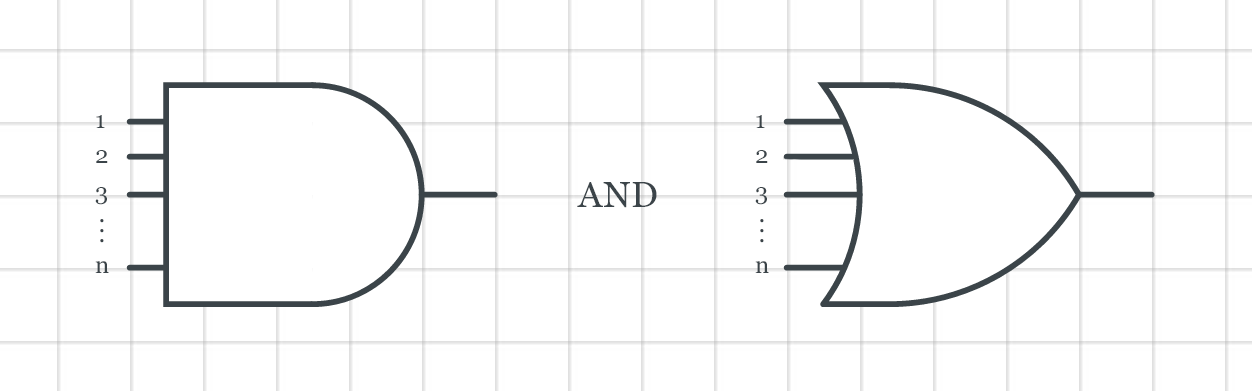
<style>
.page{position:relative;width:1252px;height:391px;background:#ffffff}
.page>*{position:absolute;margin:0}
.t1{font:24px "Georgia";letter-spacing:0.02em;color:#3b4449}
.t2{font:36px "Georgia";letter-spacing:0.02em;color:#3b4449}
.t3{font:24px/10px "Georgia";letter-spacing:0.02em;color:#3b4449}
</style>
<div class="page">
<p class="t1" style="left:96px;top:115px;width:9px;height:13px">1</p>
<p class="t1" style="left:756px;top:115px;width:9px;height:13px">1</p>
<p class="t1" style="left:96px;top:150px;width:12px;height:13px">2</p>
<p class="t1" style="left:756px;top:150px;width:12px;height:13px">2</p>
<p class="t2" style="left:577px;top:182px;width:80px;height:26px">AND</p>
<p class="t1" style="left:95px;top:187px;width:12px;height:18px">3</p>
<p class="t1" style="left:755px;top:187px;width:12px;height:18px">3</p>
<p class="t3" style="left:100px;top:219px;width:4px;height:24px">.<br>.<br>.</p>
<p class="t3" style="left:760px;top:219px;width:4px;height:24px">.<br>.<br>.</p>
<p class="t1" style="left:95px;top:261px;width:14px;height:12px">n</p>
<p class="t1" style="left:755px;top:261px;width:14px;height:12px">n</p>
</div>
